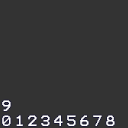
<style>
.page{position:relative;width:128px;height:128px;background:#333333}
.page>*{position:absolute;margin:0}
.t1{font:12px "Terminal";letter-spacing:0.08em;color:#ffffff}
</style>
<div class="page">
<p class="t1" style="left:2px;top:100px;width:9px;height:11px">9</p>
<p class="t1" style="left:2px;top:115px;width:9px;height:11px">0</p>
<p class="t1" style="left:16px;top:115px;width:7px;height:11px">1</p>
<p class="t1" style="left:28px;top:115px;width:9px;height:11px">2</p>
<p class="t1" style="left:41px;top:115px;width:9px;height:11px">3</p>
<p class="t1" style="left:54px;top:115px;width:9px;height:11px">4</p>
<p class="t1" style="left:67px;top:115px;width:9px;height:11px">5</p>
<p class="t1" style="left:80px;top:115px;width:9px;height:11px">6</p>
<p class="t1" style="left:93px;top:115px;width:9px;height:11px">7</p>
<p class="t1" style="left:106px;top:115px;width:9px;height:11px">8</p>
</div>
